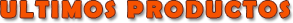
<style>
.page{position:relative;width:293px;height:23px;background:#f65200}
.page>*{position:absolute;margin:0}
.t1{font:24px "BerlinSansFBDemi-Bold";letter-spacing:0.1em;color:#f65200;font-weight:bold}
</style>
<div class="page">
<p class="t1" style="left:1px;top:1px;width:289px;height:17px">ULTIMOS PRODUCTOS</p>
</div>
